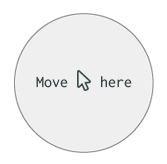
<style>
.page{position:relative;width:167px;height:164px;background:#efefef}
.page>*{position:absolute;margin:0}
.t1{font:16px "Inconsolata";color:#334647}
</style>
<div class="page">
<p class="t1" style="left:36px;top:76px;width:96px;height:12px">Move    here</p>
</div>
